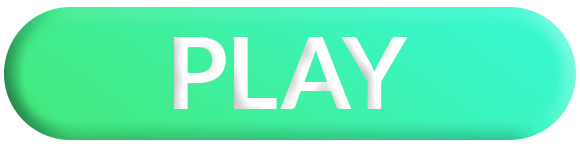
<style>
.page{position:relative;width:580px;height:146px}
.page>*{position:absolute;margin:0}
.t1{font:100px "Lato-Bold";color:#fefefe}
</style>
<div class="page">
<p class="t1" style="left:174px;top:37px;width:234px;height:72px">PLAY</p>
</div>
